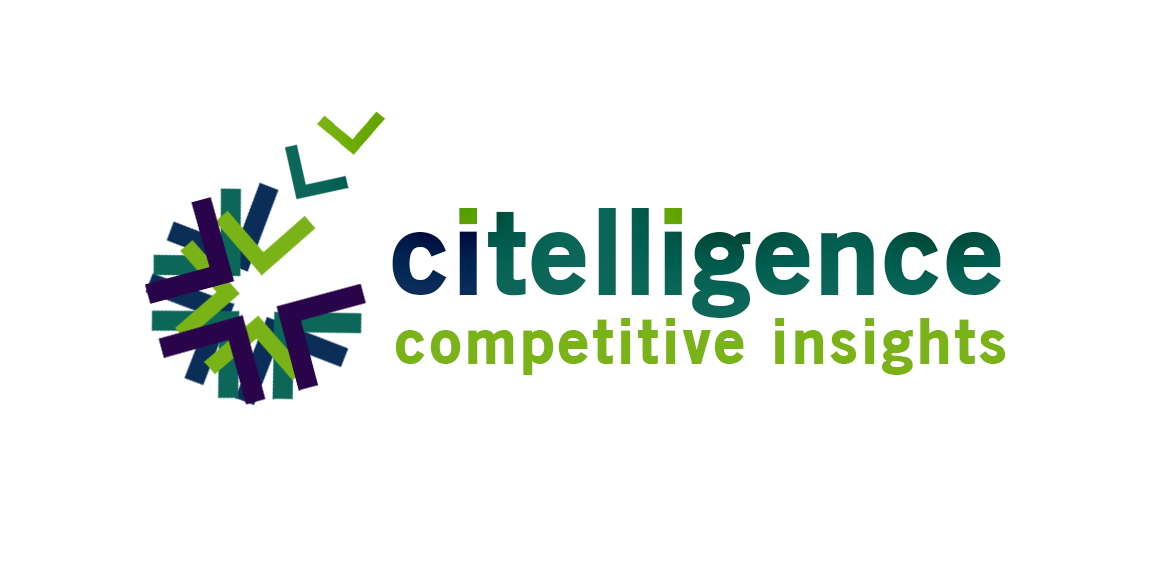
<style>
.page{position:relative;width:1170px;height:562px;background:#ffffff}
.page>*{position:absolute;margin:0}
.t1{font:116.6px "OldSansBlack";letter-spacing:0.025em;color:#0d6759}
.t2{font:116.6px "OldSansBlack";letter-spacing:0.025em;color:#0b2e59}
.t3{font:62.4px "OldSansBlack";letter-spacing:0.055em;color:#7ab317}
</style>
<div class="page">
<p class="t1" style="left:392px;top:208px;width:609px;height:110px"><span class="t2">ci</span>telligence</p>
<p class="t3" style="left:395px;top:318px;width:611px;height:57px">competitive insights</p>
</div>
